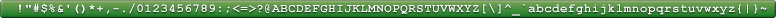
<style>
.page{position:relative;width:776px;height:18px}
.page>*{position:absolute;margin:0}
.t1{font:12px "CourierNewPS-BoldMT";letter-spacing:0.066em;color:#ffffff}
</style>
<div class="page">
<p class="t1" style="left:19px;top:3px;width:748px;height:13px">!"#$%&amp;'()*+,-./0123456789:;&lt;=&gt;?@ABCDEFGHIJKLMNOPQRSTUVWXYZ[\]^_`abcdefghijklmnopqrstuvwxyz{|}~</p>
</div>
